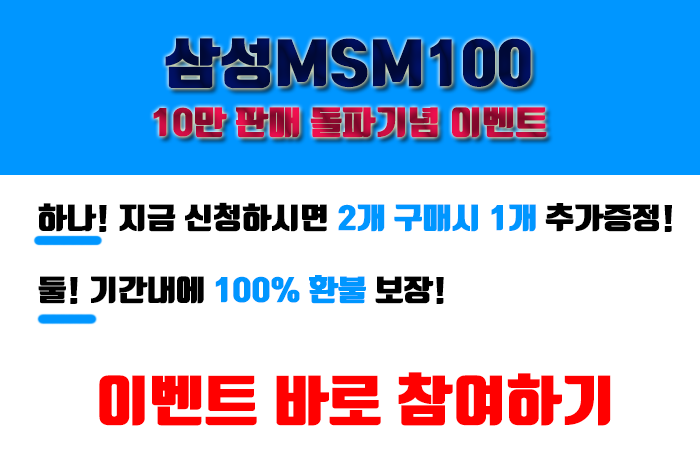
<style>
.page{position:relative;width:700px;height:450px;background:#ffffff}
.page>*{position:absolute;margin:0}
.t1{font:32.4px/72px "TmonMonsoriBlack";scale:1.11 1}
.t2{font:54px/72px "TmonMonsoriBlack";scale:1.11 1}
.t3{font:28.8px/72px "TmonMonsoriBlack";color:#000000;scale:1.11 1}
.t4{font:28.8px/72px "TmonMonsoriBlack";color:#0096ff;scale:1.11 1}
.t5{font:54px "TmonMonsoriBlack";color:#ff0000;scale:1.11 1}
</style>
<div class="page">
<p class="t1" style="left:153px;top:38px;width:394px;height:100px;text-align:center"><span class="t2">삼성MSM100<br></span>10만 판매 돌파기념 이벤트</p>
<p class="t3" style="left:38px;top:202px;width:634px;height:102px">하나! 지금 신청하시면<span class="t4"> 2개 구매시 1개 </span>추가증정!<br>둘! 기간내에 <span class="t4">100% 환불</span> 보장!</p>
<p class="t5" style="left:99px;top:372px;width:512px;height:54px">이벤트 바로 참여하기</p>
</div>
